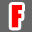
<style>
.page{position:relative;width:32px;height:32px;background:#666666}
.page>*{position:absolute;margin:0}
.t1{font:27.7px "Impact";color:#ff0000;text-transform:uppercase;font-weight:bold}
</style>
<div class="page">
<p class="t1" style="left:11px;top:5px;width:11px;height:23px">F</p>
</div>
